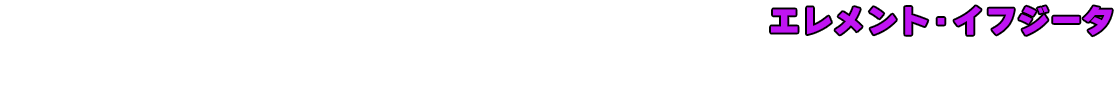
<style>
.page{position:relative;width:1120px;height:85px;background:#ffffff}
.page>*{position:absolute;margin:0}
.t1{font:32.5px "WanpakuRuika-08";color:#c014f3}
.t2{font:32.5px "WanpakuRuika-08";letter-spacing:-0.2em;color:#c014f3}
.t3{font:32.5px "HGPGothicE";letter-spacing:-0.15em;color:#c014f3}
</style>
<div class="page">
<p class="t1" style="left:771px;top:6px;width:341px;height:30px">エレメン<span class="t2">ト</span><span class="t3">・</span>イフジータ</p>
</div>
